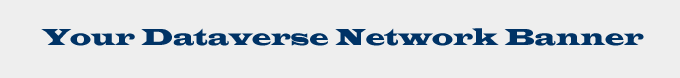
<style>
.page{position:relative;width:680px;height:78px;background:#eeeeee}
.page>*{position:absolute;margin:0}
.t1{font:24px "LatinWide";color:#003366;scale:0.9 1}
</style>
<div class="page">
<p class="t1" style="left:41px;top:28px;width:603px;height:18px">Your Dataverse Network Banner</p>
</div>
